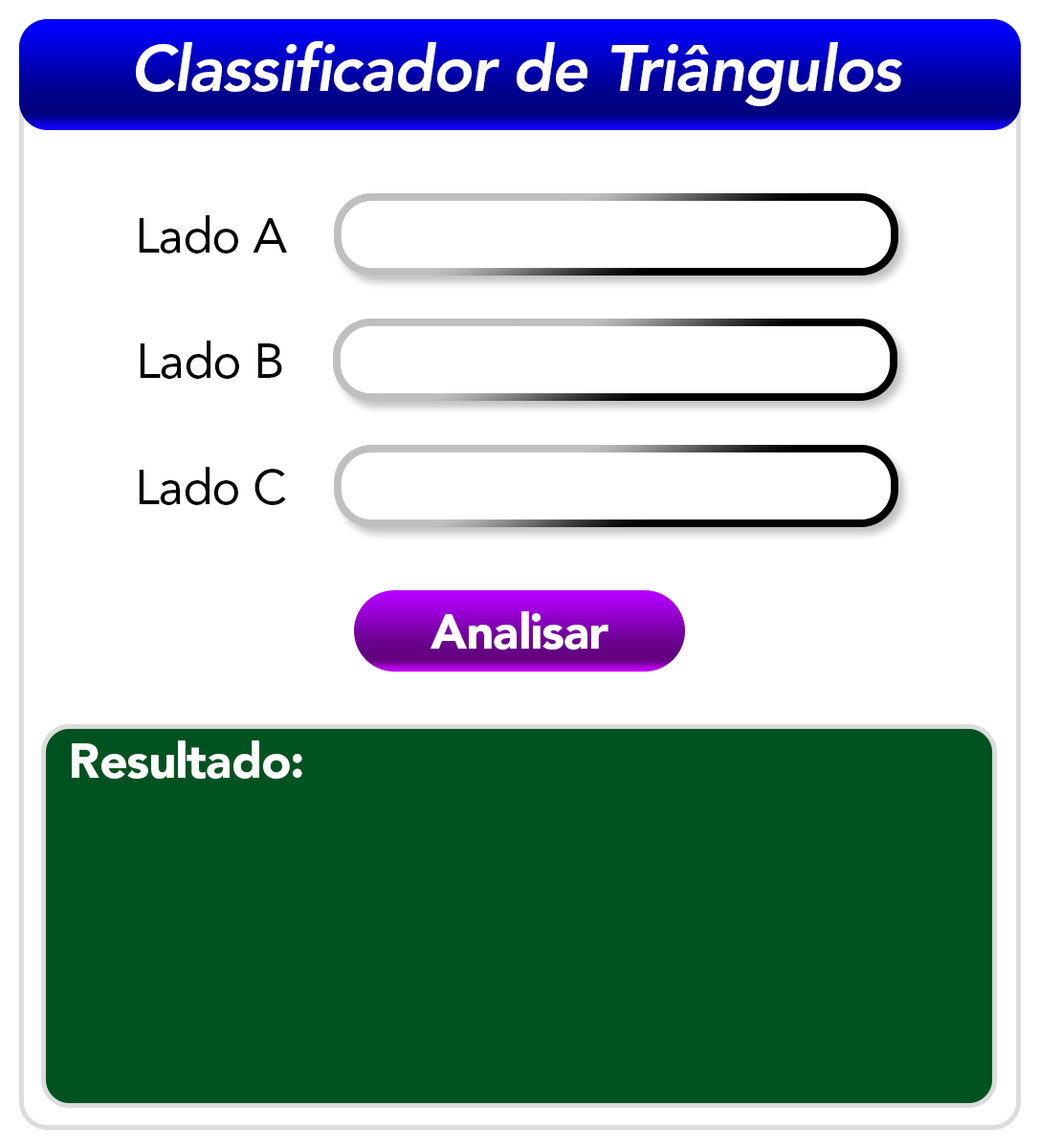
<style>
.page{position:relative;width:1039px;height:1148px;background:#ffffff}
.page>*{position:absolute;margin:0}
.t1{font:64.6px "AvenirLTStd-HeavyOblique";letter-spacing:-0.02em;color:#ffffff}
.t2{font:49px "AvenirLTStd-Roman";letter-spacing:-0.02em;color:#000000}
.t3{font:49px "AvenirLTStd-Black";letter-spacing:-0.02em;color:#ffffff}
</style>
<div class="page">
<p class="t1" style="left:136px;top:41px;width:766px;height:65px">Classificador de Triângulos</p>
<p class="t2" style="left:139px;top:215px;width:148px;height:38px">Lado A</p>
<p class="t2" style="left:140px;top:341px;width:142px;height:38px">Lado B</p>
<p class="t2" style="left:139px;top:467px;width:147px;height:38px">Lado C</p>
<p class="t3" style="left:430px;top:611px;width:178px;height:39px">Analisar</p>
<p class="t3" style="left:72px;top:740px;width:230px;height:39px">Resultado:</p>
</div>
